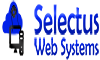
<style>
.page{position:relative;width:100px;height:60px;background:#ffffff}
.page>*{position:absolute;margin:0}
.t1{font:42px "BerlinSansFB-Reg";scale:0.48 1}
.t2{font:24.6px "BerlinSansFB-Reg";color:#021dc1;scale:0.48 1}
</style>
<div class="page">
<p class="t1" style="left:34px;top:4px;width:65px;height:31px">Selectus</p>
<p class="t2" style="left:34px;top:37px;width:65px;height:23px">Web Systems</p>
</div>
